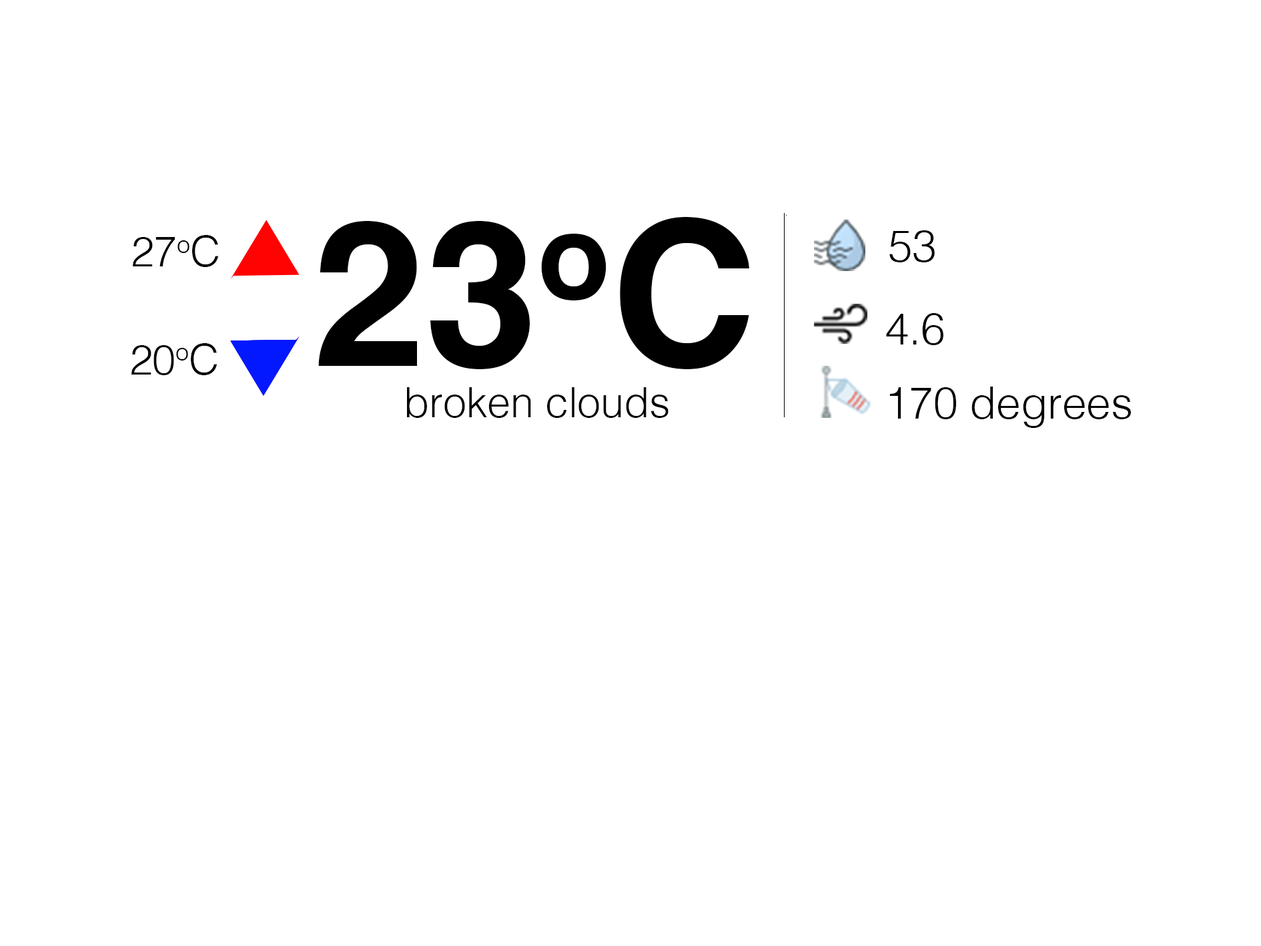
<style>
.page{position:relative;width:1261px;height:946px;background:#ffffff}
.page>*{position:absolute;margin:0}
.t1{font:203px "Helvetica-Bold";color:#000000}
.t2{font:75.1px "Helvetica-Light";color:#020202}
.t3{font:41.7px "Helvetica-Light";color:#020202}
.t4{font:41.7px "Helvetica-Light";color:#000000}
</style>
<div class="page">
<p class="t1" style="left:318px;top:217px;width:431px;height:152px">23oC</p>
<p class="t2" style="left:889px;top:230px;width:46px;height:32px">53</p>
<p class="t3" style="left:133px;top:235px;width:86px;height:32px">27oC</p>
<p class="t2" style="left:886px;top:313px;width:58px;height:32px">4.6</p>
<p class="t3" style="left:131px;top:343px;width:87px;height:32px">20oC</p>
<p class="t4" style="left:407px;top:387px;width:262px;height:31px">broken clouds</p>
<p class="t2" style="left:889px;top:386px;width:242px;height:42px">170 degrees</p>
</div>
